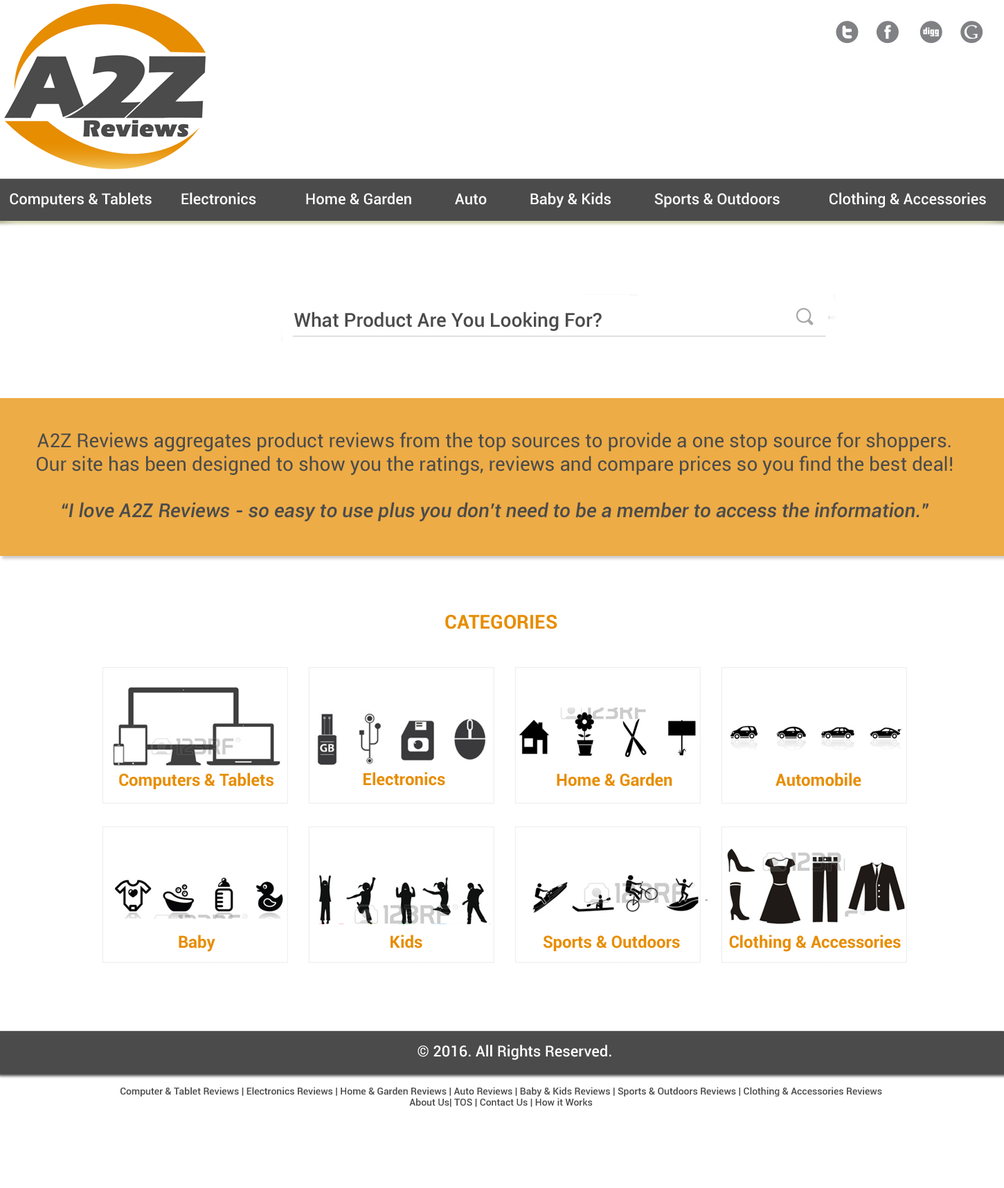
<style>
.page{position:relative;width:1004px;height:1188px;background:#ffffff}
.page>*{position:absolute;margin:0}
.t1{font:15.2px "Roboto-Medium";color:#ffffff}
.t2{font:19.4px "Roboto-Medium";color:#4b4b4b}
.t3{font:19.4px "Roboto-Regular";color:#4b4b4b}
.t4{font:19.4px "Roboto-MediumItalic";color:#4b4b4b}
.t5{font:19.4px "Roboto-Bold";color:#e78d01}
.t6{font:16.6px "Roboto-Bold";color:#e78d01}
.t7{font:9.7px "Roboto-Medium";color:#4b4b4b}
</style>
<div class="page">
<p class="t1" style="left:10px;top:192px;width:976px;height:16px">Computers &amp; Tablets  Electronics  Home &amp; Garden  Auto  Baby &amp; Kids  Sports &amp; Outdoors  Clothing &amp; Accessories</p>
<p class="t2" style="left:294px;top:312px;width:308px;height:19px">What Product Are You Looking For?</p>
<p class="t3" style="left:37px;top:432px;width:915px;height:89px;text-align:center">A2Z Reviews aggregates product reviews from the top sources to provide a one stop source for shoppers.<br>Our site has been designed to show you the ratings, reviews and compare prices so you find the best deal!<br><br><span class="t4">“I love A2Z Reviews - so easy to use plus you don’t need to be a member to access the information.”</span></p>
<p class="t5" style="left:445px;top:615px;width:112px;height:14px">CATEGORIES</p>
<p class="t6" style="left:119px;top:773px;width:154px;height:16px">Computers &amp; Tablets</p>
<p class="t6" style="left:363px;top:772px;width:82px;height:14px">Electronics</p>
<p class="t6" style="left:557px;top:773px;width:115px;height:13px">Home &amp; Garden</p>
<p class="t6" style="left:775px;top:773px;width:86px;height:13px">Automobile</p>
<p class="t6" style="left:179px;top:935px;width:36px;height:17px">Baby</p>
<p class="t6" style="left:390px;top:935px;width:32px;height:13px">Kids</p>
<p class="t6" style="left:543px;top:935px;width:137px;height:16px">Sports &amp; Outdoors</p>
<p class="t6" style="left:729px;top:935px;width:172px;height:17px">Clothing &amp; Accessories</p>
<p class="t1" style="left:417px;top:1045px;width:194px;height:15px">© 2016. All Rights Reserved.</p>
<p class="t7" style="left:120px;top:1087px;width:762px;height:20px;text-align:center">Computer &amp; Tablet Reviews | Electronics Reviews | Home &amp; Garden Reviews | Auto Reviews | Baby &amp; Kids Reviews | Sports &amp; Outdoors Reviews | Clothing &amp; Accessories Reviews<br>About Us| TOS | Contact Us | How it Works</p>
</div>
